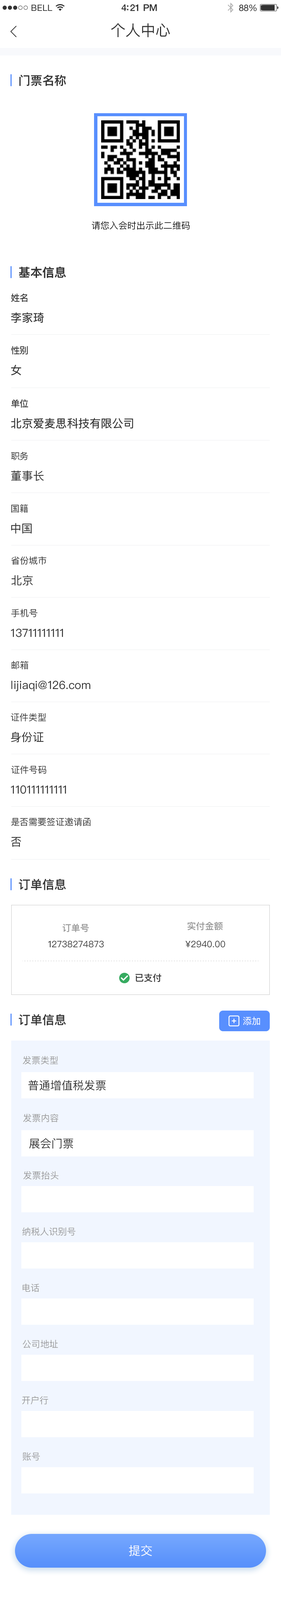
<style>
.page{position:relative;width:281px;height:1610px;background:#ffffff}
.page>*{position:absolute;margin:0}
.t1{font:8.6px "HelveticaNeue";letter-spacing:0.02em;color:#333333}
.t2{font:9.4px "HelveticaNeue-Medium";letter-spacing:-0.02em;color:#333333}
.t3{font:9px "HelveticaNeue";letter-spacing:-0.02em;color:#333333}
.t4{font:15px "PingFangSC-Regular";color:#333333}
.t5{font:12px "PingFangSC-Semibold";color:#333333}
.t6{font:9px "PingFangSC-Regular";color:#000000}
.t7{font:9px "PingFangSC-Regular";color:#333333}
.t8{font:11.2px "PingFangSC-Regular";color:#333333}
.t9{font:11.3px "PingFangSC-Regular";color:#333333}
.t10{font:9px "PingFangSC-Semibold";color:#999999}
.t11{font:9px "PingFangSC-Regular";color:#333333;text-transform:uppercase}
.t12{font:9px "PingFangSC-Semibold";color:#333333;text-transform:uppercase}
.t13{font:9px "PingFangSC-Regular";color:#ffffff}
.t14{font:9px "PingFangSC-Regular";color:#999999}
.t15{font:11.2px "PingFangSC-Regular";color:#333333;text-transform:uppercase}
.t16{font:12px "PingFangSC-Regular";color:#f8f9fc}
</style>
<div class="page">
<p class="t1" style="left:31px;top:4px;width:21px;height:7px">BELL</p>
<p class="t2" style="left:121px;top:4px;width:36px;height:7px">4:21 PM</p>
<p class="t3" style="left:239px;top:4px;width:18px;height:7px">88%</p>
<p class="t4" style="left:111px;top:23px;width:59px;height:14px">个人中心</p>
<p class="t5" style="left:19px;top:75px;width:47px;height:11px">门票名称</p>
<p class="t6" style="left:92px;top:221px;width:98px;height:9px">请您入会时出示此二维码</p>
<p class="t5" style="left:19px;top:267px;width:47px;height:11px">基本信息</p>
<p class="t5" style="left:19px;top:267px;width:47px;height:11px">基本信息</p>
<p class="t7" style="left:11px;top:294px;width:16px;height:8px">姓名</p>
<p class="t7" style="left:11px;top:294px;width:16px;height:8px">姓名</p>
<p class="t8" style="left:11px;top:312px;width:33px;height:11px">李家琦</p>
<p class="t8" style="left:11px;top:312px;width:33px;height:11px">李家琦</p>
<p class="t7" style="left:11px;top:346px;width:17px;height:9px">性别</p>
<p class="t7" style="left:11px;top:346px;width:17px;height:9px">性别</p>
<p class="t8" style="left:11px;top:365px;width:10px;height:10px">女</p>
<p class="t8" style="left:11px;top:365px;width:10px;height:10px">女</p>
<p class="t7" style="left:11px;top:399px;width:17px;height:9px">单位</p>
<p class="t7" style="left:11px;top:399px;width:17px;height:9px">单位</p>
<p class="t8" style="left:11px;top:418px;width:122px;height:11px">北京爱麦思科技有限公司</p>
<p class="t8" style="left:11px;top:418px;width:122px;height:11px">北京爱麦思科技有限公司</p>
<p class="t7" style="left:11px;top:452px;width:17px;height:8px">职务</p>
<p class="t8" style="left:11px;top:470px;width:33px;height:11px">董事长</p>
<p class="t7" style="left:11px;top:504px;width:17px;height:9px">国籍</p>
<p class="t9" style="left:11px;top:523px;width:21px;height:11px">中国</p>
<p class="t7" style="left:11px;top:556px;width:35px;height:9px">省份城市</p>
<p class="t9" style="left:11px;top:575px;width:22px;height:11px">北京</p>
<p class="t7" style="left:11px;top:609px;width:26px;height:8px">手机号</p>
<p class="t8" style="left:11px;top:629px;width:52px;height:8px">13711111111</p>
<p class="t7" style="left:12px;top:661px;width:16px;height:8px">邮箱</p>
<p class="t9" style="left:11px;top:681px;width:79px;height:11px">lijiaqi@126.com</p>
<p class="t7" style="left:11px;top:713px;width:35px;height:9px">证件类型</p>
<p class="t8" style="left:11px;top:732px;width:33px;height:11px">身份证</p>
<p class="t7" style="left:11px;top:765px;width:35px;height:9px">证件号码</p>
<p class="t8" style="left:11px;top:785px;width:55px;height:9px">110111111111</p>
<p class="t7" style="left:11px;top:818px;width:80px;height:8px">是否需要签证邀请函</p>
<p class="t9" style="left:11px;top:837px;width:10px;height:10px">否</p>
<p class="t5" style="left:19px;top:879px;width:47px;height:11px">订单信息</p>
<p class="t10" style="left:63px;top:924px;width:26px;height:8px">订单号</p>
<p class="t10" style="left:187px;top:922px;width:36px;height:8px">实付金额</p>
<p class="t11" style="left:48px;top:941px;width:56px;height:7px">12738274873</p>
<p class="t11" style="left:186px;top:941px;width:39px;height:7px">¥2940.00</p>
<p class="t12" style="left:135px;top:974px;width:27px;height:8px">已支付</p>
<p class="t5" style="left:19px;top:1014px;width:47px;height:12px">订单信息</p>
<p class="t13" style="left:243px;top:1017px;width:17px;height:8px">添加</p>
<p class="t14" style="left:23px;top:1056px;width:35px;height:9px">发票类型</p>
<p class="t15" style="left:28px;top:1080px;width:78px;height:11px">普通增值税发票</p>
<p class="t14" style="left:23px;top:1114px;width:35px;height:8px">发票内容</p>
<p class="t15" style="left:29px;top:1138px;width:44px;height:11px">展会门票</p>
<p class="t14" style="left:23px;top:1171px;width:35px;height:9px">发票抬头</p>
<p class="t14" style="left:22px;top:1227px;width:54px;height:9px">纳税人识别号</p>
<p class="t14" style="left:22px;top:1284px;width:17px;height:8px">电话</p>
<p class="t14" style="left:22px;top:1340px;width:36px;height:8px">公司地址</p>
<p class="t14" style="left:22px;top:1396px;width:26px;height:9px">开户行</p>
<p class="t14" style="left:22px;top:1452px;width:18px;height:9px">账号</p>
<p class="t16" style="left:129px;top:1545px;width:23px;height:11px">提交</p>
</div>
